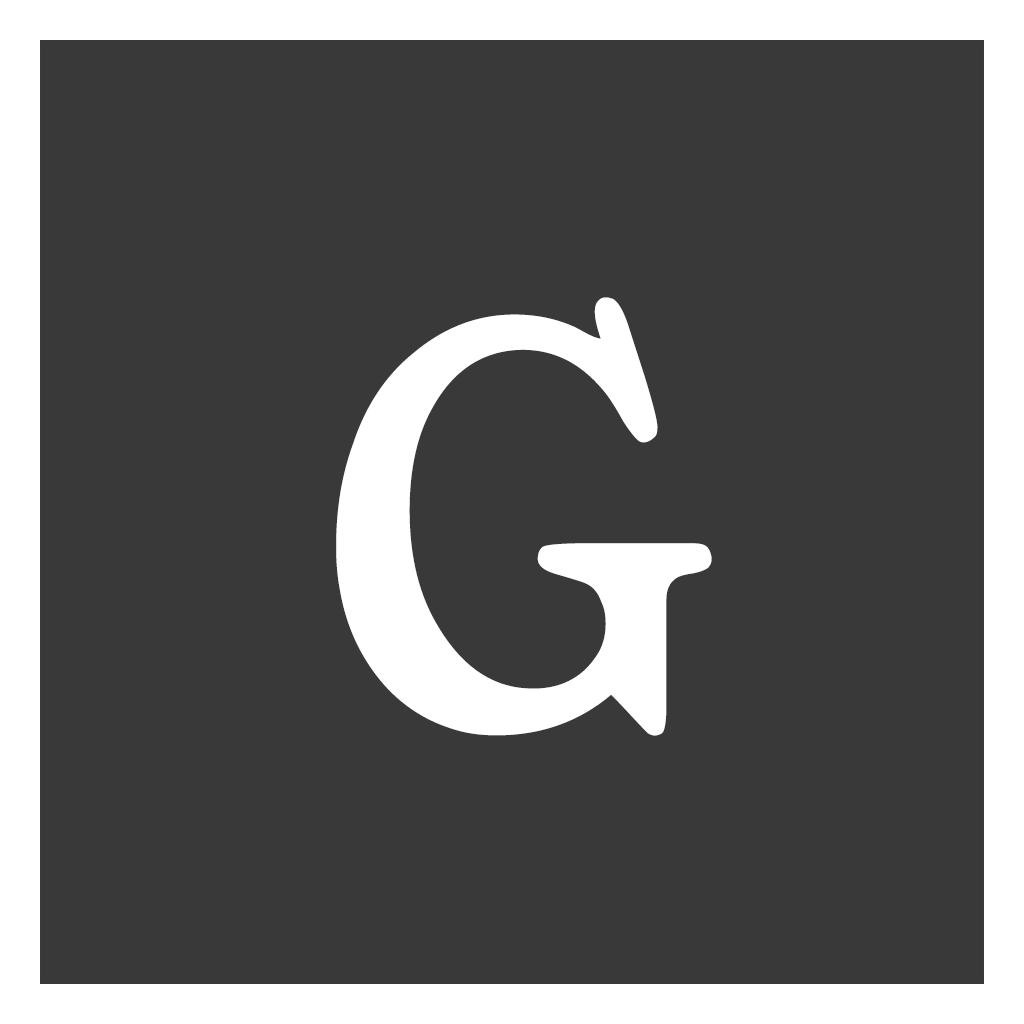
<style>
.page{position:relative;width:1024px;height:1024px;background:#393939}
.page>*{position:absolute;margin:0}
.t1{font:600px "ChelseaAlternates";color:#ffffff}
</style>
<div class="page">
<p class="t1" style="left:336px;top:297px;width:376px;height:439px">G</p>
</div>
